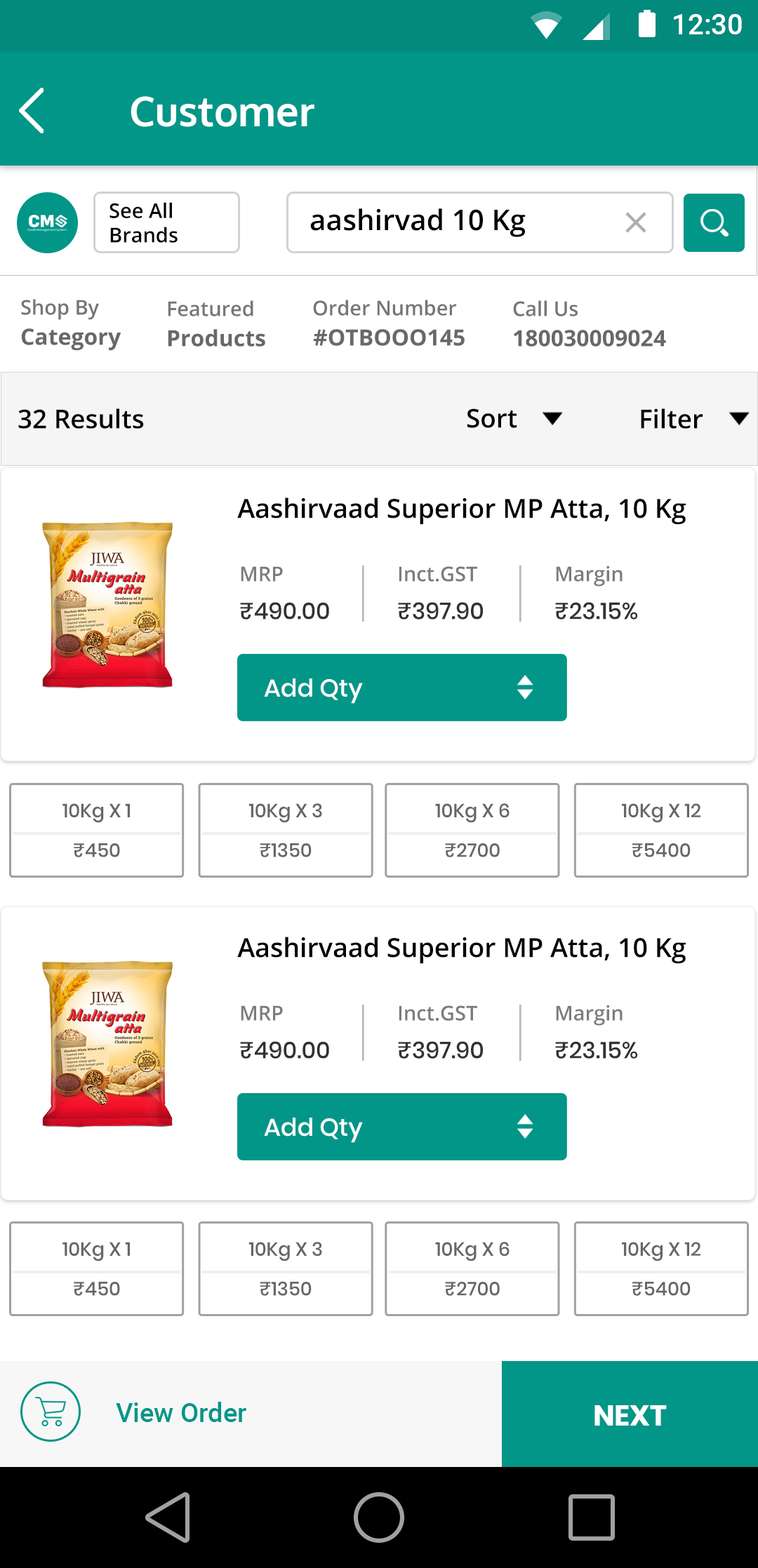
<style>
.page{position:relative;width:758px;height:1568px;background:#ffffff}
.page>*{position:absolute;margin:0}
.t1{font:28.9px "Roboto-Medium";color:#ffffff}
.t2{font:40.7px "Oxygen-Bold";color:#ffffff}
.t3{font:40.7px "Oxygen-Bold";color:#ffffff;text-transform:uppercase}
.t4{font:20.3px "OpenSans-SemiBold";color:#030303}
.t5{font:28.5px "OpenSans-SemiBold";color:#030303}
.t6{font:20.3px "OpenSans-SemiBold";color:#767676}
.t7{font:22.5px "OpenSans-Bold";color:#686868}
.t8{font:25.9px "OpenSans-SemiBold";color:#030303}
.t9{font:26.4px "OpenSans-SemiBold";color:#030303}
.t10{font:20.3px "OpenSans-SemiBold";color:#7c7c7c;text-transform:uppercase}
.t11{font:20.3px "OpenSans-SemiBold";color:#7c7c7c}
.t12{font:23.2px "Poppins-Medium";color:#323232;text-transform:uppercase}
.t13{font:24.6px "Poppins-Medium";color:#ffffff}
.t14{font:24.6px "Poppins-Medium";color:#ffffff;text-transform:uppercase}
.t15{font:19px "Poppins-Medium";color:#666666}
.t16{font:26.6px "Roboto-Medium";color:#029688}
.t17{font:28.8px "Poppins-Bold";color:#ffffff;text-transform:uppercase}
</style>
<div class="page">
<p class="t1" style="left:674px;top:14px;width:68px;height:20px">12:30</p>
<p class="t2" style="left:130px;top:96px;width:184px;height:31px"><span class="t3">c</span>ustomer</p>
<p class="t4" style="left:109px;top:202px;width:68px;height:41px">See All<br>Brands</p>
<p class="t5" style="left:310px;top:208px;width:215px;height:29px">aashirvad 10 Kg</p>
<p class="t6" style="left:21px;top:299px;width:78px;height:21px">Shop By</p>
<p class="t6" style="left:168px;top:300px;width:85px;height:16px">Featured</p>
<p class="t6" style="left:313px;top:300px;width:144px;height:16px">Order Number</p>
<p class="t6" style="left:513px;top:300px;width:64px;height:16px">Call Us</p>
<p class="t7" style="left:21px;top:328px;width:100px;height:23px">Category</p>
<p class="t7" style="left:168px;top:329px;width:97px;height:18px">Products</p>
<p class="t7" style="left:313px;top:329px;width:151px;height:17px">#OTBOOO145</p>
<p class="t7" style="left:514px;top:330px;width:152px;height:17px">180030009024</p>
<p class="t8" style="left:18px;top:408px;width:126px;height:21px">32 Results</p>
<p class="t8" style="left:467px;top:408px;width:50px;height:20px">Sort</p>
<p class="t8" style="left:641px;top:408px;width:62px;height:21px">Filter</p>
<p class="t9" style="left:237px;top:497px;width:448px;height:28px">Aashirvaad Superior MP Atta, 10 Kg</p>
<p class="t10" style="left:241px;top:566px;width:42px;height:16px">Mrp</p>
<p class="t10" style="left:398px;top:566px;width:79px;height:16px">I<span class="t11">nct</span>.gst</p>
<p class="t11" style="left:556px;top:565px;width:66px;height:22px"><span class="t10">M</span>argin</p>
<p class="t12" style="left:240px;top:602px;width:89px;height:17px">₹490.00</p>
<p class="t12" style="left:398px;top:602px;width:85px;height:17px">₹397.90</p>
<p class="t12" style="left:555px;top:602px;width:83px;height:17px">₹23.15%</p>
<p class="t13" style="left:264px;top:678px;width:99px;height:26px"><span class="t14">A</span>dd Qty</p>
<p class="t15" style="left:62px;top:803px;width:68px;height:20px">10Kg X 1</p>
<p class="t15" style="left:248px;top:803px;width:74px;height:20px">10Kg X 3</p>
<p class="t15" style="left:435px;top:803px;width:74px;height:20px">10Kg X 6</p>
<p class="t15" style="left:622px;top:803px;width:78px;height:20px">10Kg X 12</p>
<p class="t15" style="left:74px;top:843px;width:46px;height:14px">₹450</p>
<p class="t15" style="left:260px;top:843px;width:51px;height:14px">₹1350</p>
<p class="t15" style="left:445px;top:843px;width:55px;height:14px">₹2700</p>
<p class="t15" style="left:632px;top:843px;width:58px;height:14px">₹5400</p>
<p class="t9" style="left:237px;top:937px;width:448px;height:27px">Aashirvaad Superior MP Atta, 10 Kg</p>
<p class="t10" style="left:241px;top:1005px;width:42px;height:16px">Mrp</p>
<p class="t10" style="left:398px;top:1005px;width:79px;height:16px">I<span class="t11">nct</span>.gst</p>
<p class="t11" style="left:556px;top:1005px;width:66px;height:21px"><span class="t10">M</span>argin</p>
<p class="t12" style="left:240px;top:1041px;width:89px;height:18px">₹490.00</p>
<p class="t12" style="left:398px;top:1041px;width:85px;height:18px">₹397.90</p>
<p class="t12" style="left:555px;top:1041px;width:83px;height:18px">₹23.15%</p>
<p class="t13" style="left:264px;top:1118px;width:99px;height:25px"><span class="t14">A</span>dd Qty</p>
<p class="t15" style="left:62px;top:1242px;width:68px;height:19px">10Kg X 1</p>
<p class="t15" style="left:248px;top:1242px;width:74px;height:19px">10Kg X 3</p>
<p class="t15" style="left:435px;top:1242px;width:74px;height:19px">10Kg X 6</p>
<p class="t15" style="left:622px;top:1242px;width:78px;height:19px">10Kg X 12</p>
<p class="t15" style="left:74px;top:1282px;width:46px;height:14px">₹450</p>
<p class="t15" style="left:260px;top:1281px;width:51px;height:15px">₹1350</p>
<p class="t15" style="left:445px;top:1282px;width:55px;height:14px">₹2700</p>
<p class="t15" style="left:632px;top:1282px;width:58px;height:14px">₹5400</p>
<p class="t16" style="left:116px;top:1402px;width:130px;height:20px">View Order</p>
<p class="t17" style="left:594px;top:1405px;width:72px;height:21px">next</p>
</div>
